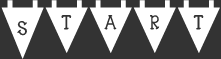
<style>
.page{position:relative;width:221px;height:59px;background:#333333}
.page>*{position:absolute;margin:0}
.t1{font:80px "KGRoyals";color:#ffffff}
</style>
<div class="page">
<p class="t1" style="left:1px;top:0px;width:219px;height:59px">Start</p>
</div>
